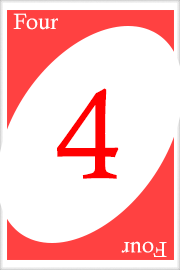
<style>
.page{position:relative;width:180px;height:270px;background:#ffffff}
.page>*{position:absolute;margin:0}
.t1{font:22px "CalistoMT";color:#ffffff}
.t2{font:128px "CalistoMT";color:#ff0001}
.t3{font:21.7px "CalistoMT";color:#ffffff}
</style>
<div class="page">
<p class="t1" style="left:13px;top:13px;width:45px;height:17px">Four</p>
<p class="t2" style="left:57px;top:88px;width:62px;height:91px">4</p>
<p class="t3" style="left:121px;top:241px;width:46px;height:16px;rotate:180deg">Four</p>
</div>
